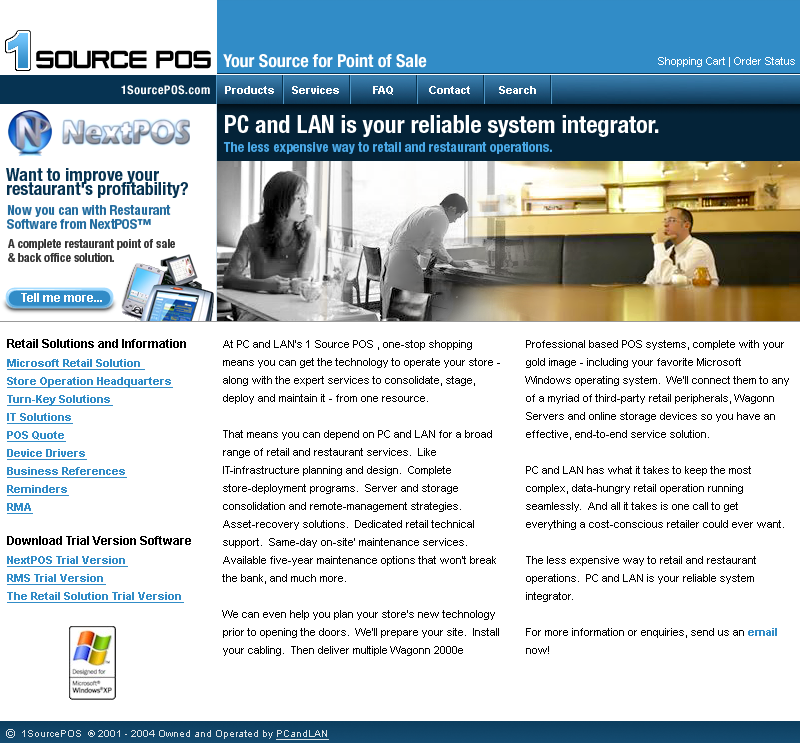
<style>
.page{position:relative;width:800px;height:743px;background:#ffffff}
.page>*{position:absolute;margin:0}
.t1{font:18px "HelveticaNeue-BoldCond";color:#ffffff}
.t2{font:11px "ArialMT";color:#ffffff}
.t3{font:12px "HelveticaNeue-BoldCond";letter-spacing:0.05em;color:#ffffff}
.t4{font:11px "Arial-BoldMT";color:#ffffff}
.t5{font:24px "HelveticaNeue-BoldCond";color:#ffffff}
.t6{font:14px "HelveticaNeue-BoldCond";color:#4aa9e7}
.t7{font:18px/14px "HelveticaNeue-BoldCond";color:#063352}
.t8{font:14px/14px "HelveticaNeue-BoldCond";color:#256ea0}
.t9{font:12px/14px "HelveticaNeue-BoldCond";color:#333333}
.t10{font:12px "Arial-BoldMT";color:#ffffff}
.t11{font:12px "Arial-BoldMT";color:#000000}
.t12{font:11px/18px "ArialMT";color:#000000}
.t13{font:11px/18px "Arial-BoldMT";color:#318cc7}
.t14{font:11px/18px "Arial-BoldMT";color:#318cc7;text-decoration:underline}
.t15{font:12px "ArialMT";color:#dfe4e7}
.t16{font:10px "ArialMT";color:#dfe4e7}
.t17{font:10px "ArialMT";color:#dfe4e7;text-decoration:underline}
</style>
<div class="page">
<p class="t1" style="left:223px;top:54px;width:204px;height:14px">Your Source for Point of Sale</p>
<p class="t2" style="left:658px;top:57px;width:137px;height:10px">Shopping Cart | Order Status</p>
<p class="t2" style="left:658px;top:57px;width:137px;height:10px">Shopping Cart | Order Status</p>
<p class="t3" style="left:121px;top:85px;width:89px;height:10px">1SourcePOS.com</p>
<p class="t4" style="left:225px;top:86px;width:49px;height:8px">Products</p>
<p class="t4" style="left:292px;top:86px;width:47px;height:8px">Services</p>
<p class="t4" style="left:373px;top:86px;width:20px;height:9px">FAQ</p>
<p class="t4" style="left:429px;top:86px;width:41px;height:8px">Contact</p>
<p class="t4" style="left:499px;top:86px;width:37px;height:8px">Search</p>
<p class="t5" style="left:225px;top:115px;width:434px;height:22px">PC and LAN is your reliable system integrator.</p>
<p class="t6" style="left:223px;top:141px;width:329px;height:13px">The less expensive way to retail and restaurant operations.</p>
<p class="t7" style="left:6px;top:168px;width:182px;height:30px">Want to improve your <br>restaurant's profitability?</p>
<p class="t8" style="left:7px;top:204px;width:164px;height:25px">Now you can with Restaurant <br>Software from NextPOS™</p>
<p class="t9" style="left:8px;top:239px;width:167px;height:23px">A complete restaurant point of sale <br>&amp; back office solution.</p>
<p class="t10" style="left:21px;top:293px;width:81px;height:9px">Tell me more...</p>
<p class="t11" style="left:7px;top:339px;width:179px;height:9px">Retail Solutions and Information</p>
<p class="t12" style="left:222px;top:340px;width:278px;height:316px">At PC and LAN's 1 Source POS , one-stop shopping means you can get the technology to operate your store - along with the expert services to consolidate, stage, deploy and maintain it - from one resource.<br><br>That means you can depend on PC and LAN for a broad range of retail and restaurant services.  Like IT-infrastructure planning and design.  Complete store-deployment programs.  Server and storage consolidation and remote-management strategies.  Asset-recovery solutions.  Dedicated retail technical support.  Same-day on-site' maintenance services.  Available five-year maintenance options that won't break the bank, and much more.<br><br>We can even help you plan your store's new technology prior to opening the doors.  We'll prepare your site.  Install your cabling.  Then deliver multiple Wagonn 2000e</p>
<p class="t12" style="left:525px;top:340px;width:264px;height:314px">Professional based POS systems, complete with your gold image - including your favorite Microsoft Windows operating system.  We'll connect them to any of a myriad of third-party retail peripherals, Wagonn Servers and online storage devices so you have an effective, end-to-end service solution.<br><br>PC and LAN has what it takes to keep the most complex, data-hungry retail operation running seamlessly.  And all it takes is one call to get everything a cost-conscious retailer could ever want.<br><br>The less expensive way to retail and restaurant operations.  PC and LAN is your reliable system integrator.<br><br>For more information or enquiries, send us an <span class="t13">email</span> now!</p>
<p class="t14" style="left:7px;top:359px;width:166px;height:155px">Microsoft Retail Solution <br>Store Operation Headquarters<br>Turn-Key Solutions<br>IT Solutions<br>POS Quote<br>Device Drivers<br>Business References<br>Reminders<br>RMA</p>
<p class="t11" style="left:7px;top:536px;width:184px;height:9px">Download Trial Version Software</p>
<p class="t14" style="left:7px;top:556px;width:177px;height:47px">NextPOS Trial Version<br>RMS Trial Version<br>The Retail Solution Trial Version</p>
<p class="t15" style="left:6px;top:729px;width:9px;height:9px">©</p>
<p class="t16" style="left:22px;top:730px;width:307px;height:10px">1SourcePOS  ® 2001 - 2004 Owned and Operated by <span class="t17">PCandLAN</span></p>
</div>
